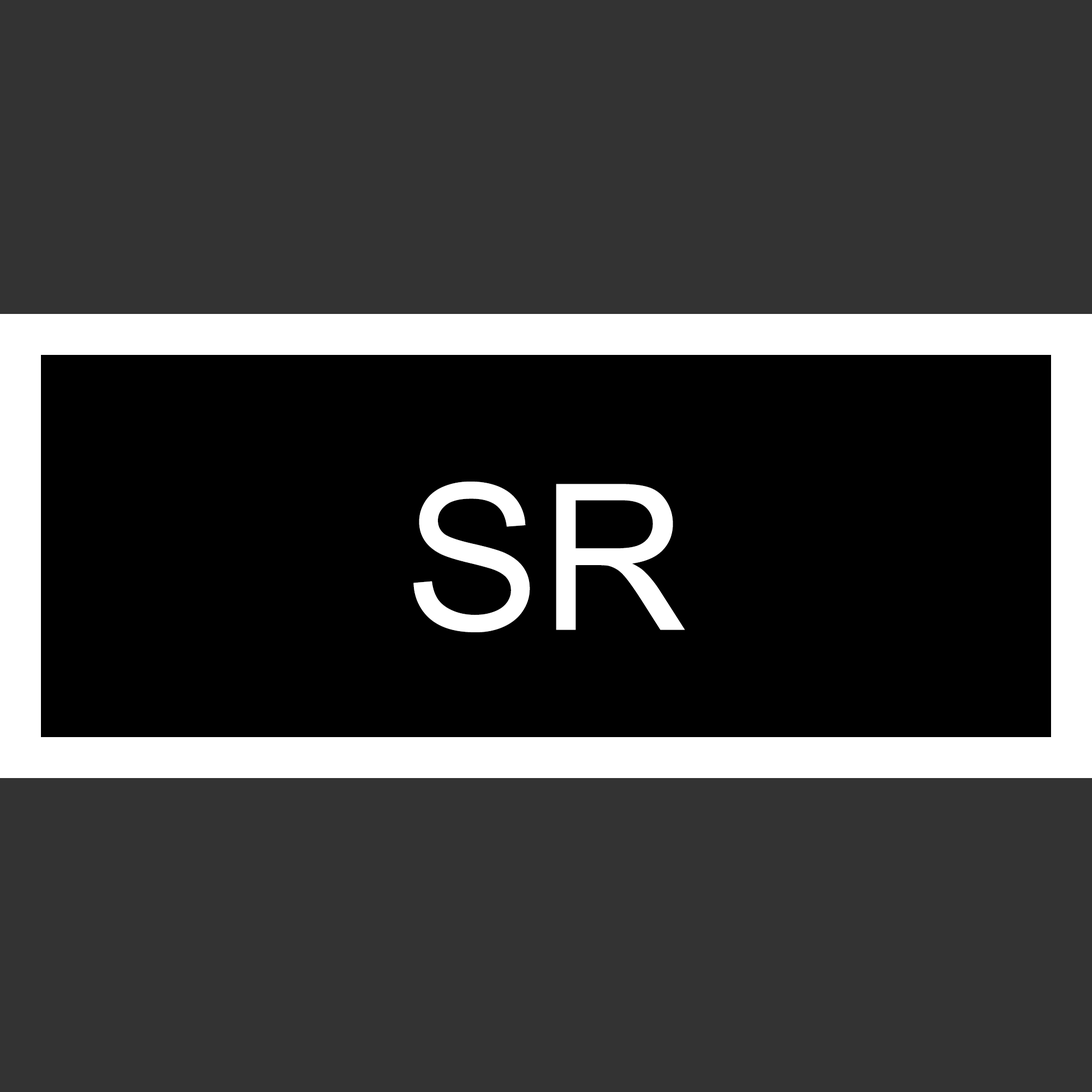
<style>
.page{position:relative;width:1092px;height:1092px;background:#333333}
.page>*{position:absolute;margin:0}
.t1{font:203.5px "ArialMT";color:#ffffff}
</style>
<div class="page">
<p class="t1" style="left:413px;top:482px;width:272px;height:150px">SR</p>
</div>
